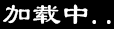
<style>
.page{position:relative;width:114px;height:29px;background:#000000}
.page>*{position:absolute;margin:0}
.t1{font:30px "LiSu";letter-spacing:-0.015em;color:#ffffff}
</style>
<div class="page">
<p class="t1" style="left:3px;top:4px;width:108px;height:20px">加载中..</p>
</div>
